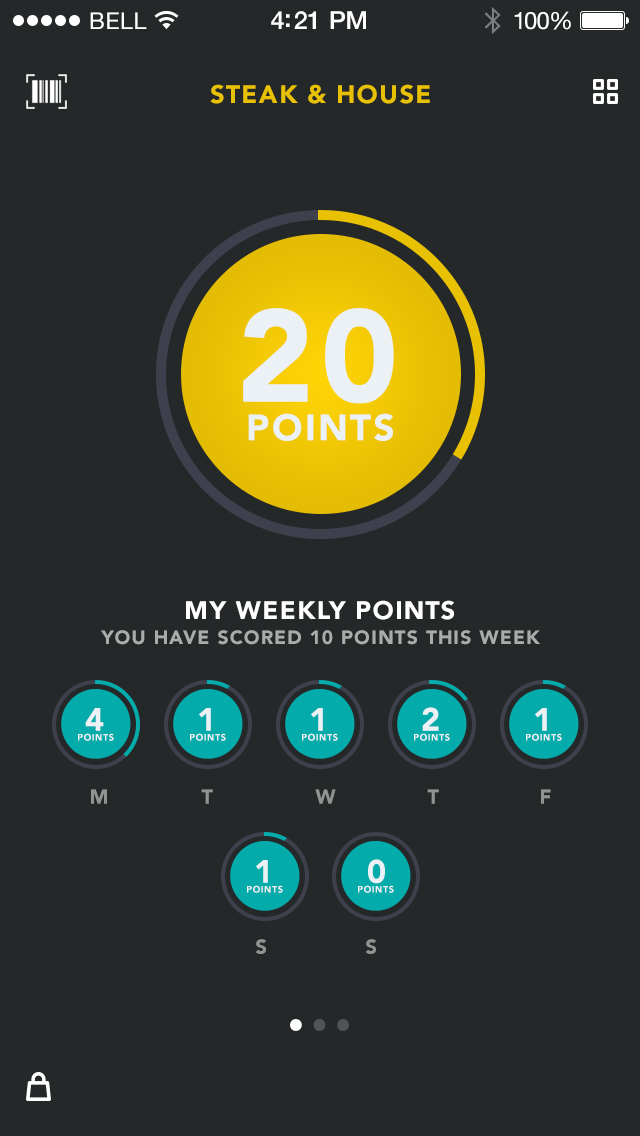
<style>
.page{position:relative;width:640px;height:1136px;background:#252829}
.page>*{position:absolute;margin:0}
.t1{font:23px "HelveticaNeue";letter-spacing:0.02em;color:#ffffff}
.t2{font:25px "HelveticaNeue-Medium";letter-spacing:-0.02em;color:#ffffff}
.t3{font:24px "HelveticaNeue";letter-spacing:-0.02em;color:#ffffff}
.t4{font:25px "Avenir-Black";letter-spacing:0.06em;color:#e8c103}
.t5{font:129.7px "Avenir-Black";letter-spacing:0.06em;color:#ebf1f5}
.t6{font:36.6px "Avenir-Black";letter-spacing:0.06em;color:#ebf1f5}
.t7{font:25px "Avenir-Black";letter-spacing:0.06em;color:#ffffff}
.t8{font:19px "Avenir-Black";letter-spacing:0.06em;color:#aaabab}
.t9{font:32.3px "Avenir-Black";letter-spacing:0.06em;color:#ebf1f5}
.t10{font:9.1px "Avenir-Black";letter-spacing:0.06em;color:#ebf1f5}
.t11{font:20px "Avenir-Black";letter-spacing:0.06em;color:#929494}
</style>
<div class="page">
<p class="t1" style="left:90px;top:12px;width:57px;height:17px">BELL</p>
<p class="t2" style="left:271px;top:11px;width:95px;height:18px">4:21 PM</p>
<p class="t3" style="left:514px;top:11px;width:57px;height:19px">100%</p>
<p class="t4" style="left:210px;top:84px;width:220px;height:20px">STEAK &amp; HOUSE</p>
<p class="t5" style="left:243px;top:308px;width:151px;height:96px">20</p>
<p class="t6" style="left:248px;top:413px;width:145px;height:28px">POINTS</p>
<p class="t7" style="left:186px;top:600px;width:268px;height:20px">MY WEEKLY POINTS</p>
<p class="t8" style="left:101px;top:630px;width:439px;height:15px">YOU HAVE SCORED 10 POINTS THIS WEEK</p>
<p class="t9" style="left:85px;top:708px;width:19px;height:23px">4</p>
<p class="t9" style="left:199px;top:708px;width:12px;height:23px">1</p>
<p class="t9" style="left:311px;top:708px;width:12px;height:23px">1</p>
<p class="t9" style="left:422px;top:707px;width:17px;height:24px">2</p>
<p class="t9" style="left:535px;top:708px;width:12px;height:23px">1</p>
<p class="t10" style="left:78px;top:733px;width:36px;height:8px">POINTS</p>
<p class="t10" style="left:190px;top:733px;width:36px;height:8px">POINTS</p>
<p class="t10" style="left:302px;top:733px;width:36px;height:8px">POINTS</p>
<p class="t10" style="left:414px;top:733px;width:36px;height:8px">POINTS</p>
<p class="t10" style="left:526px;top:733px;width:36px;height:8px">POINTS</p>
<p class="t11" style="left:91px;top:789px;width:16px;height:15px">M</p>
<p class="t11" style="left:201px;top:789px;width:12px;height:15px">T</p>
<p class="t11" style="left:315px;top:789px;width:21px;height:15px">W</p>
<p class="t11" style="left:427px;top:789px;width:12px;height:15px">T</p>
<p class="t11" style="left:541px;top:789px;width:10px;height:15px">F</p>
<p class="t9" style="left:256px;top:860px;width:12px;height:23px">1</p>
<p class="t9" style="left:368px;top:859px;width:17px;height:25px">0</p>
<p class="t10" style="left:247px;top:885px;width:36px;height:8px">POINTS</p>
<p class="t10" style="left:358px;top:885px;width:36px;height:8px">POINTS</p>
<p class="t11" style="left:256px;top:939px;width:10px;height:15px">S</p>
<p class="t11" style="left:366px;top:939px;width:10px;height:15px">S</p>
</div>
